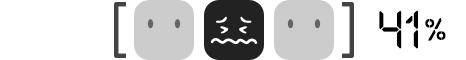
<style>
.page{position:relative;width:466px;height:60px;background:#ffffff}
.page>*{position:absolute;margin:0}
.t1{font:50px "LABDigital";color:#000000}
.t2{font:30px "LABDigital";color:#000000}
</style>
<div class="page">
<p class="t1" style="left:379px;top:10px;width:39px;height:39px">41</p>
<p class="t2" style="left:425px;top:18px;width:21px;height:23px">%</p>
</div>
